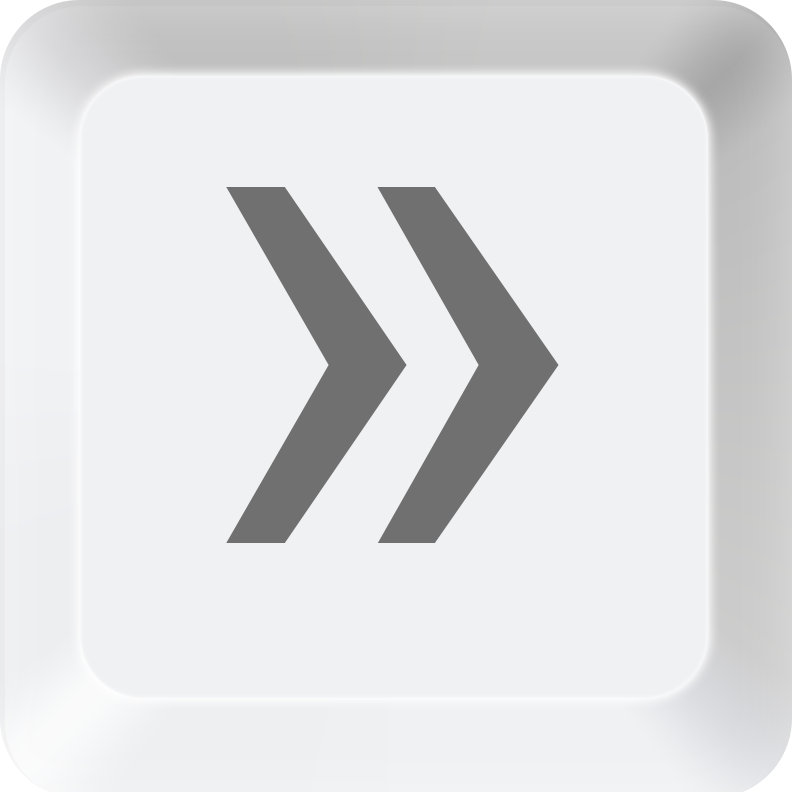
<style>
.page{position:relative;width:792px;height:792px;background:#f0f1f3}
.page>*{position:absolute;margin:0}
.t1{font:800px "ArialMT";color:#707070}
</style>
<div class="page">
<p class="t1" style="left:226px;top:187px;width:333px;height:356px">»</p>
</div>
